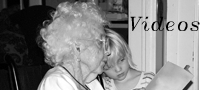
<style>
.page{position:relative;width:200px;height:90px}
.page>*{position:absolute;margin:0}
.t1{font:18.7px "ItalicT";color:#000000}
</style>
<div class="page">
<p class="t1" style="left:130px;top:16px;width:70px;height:15px">Videos</p>
</div>
